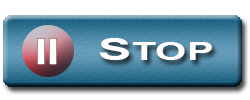
<style>
.page{position:relative;width:250px;height:100px;background:#ffffff}
.page>*{position:absolute;margin:0}
.t1{font:24.7px "Arial-BoldMT";color:#fffdfd;scale:1.64 1}
.t2{font:30.8px "Arial-BoldMT";color:#fffdfd;scale:1.64 1}
</style>
<div class="page">
<p class="t1" style="left:99px;top:38px;width:113px;height:22px"><span class="t2">S</span>TOP</p>
</div>
